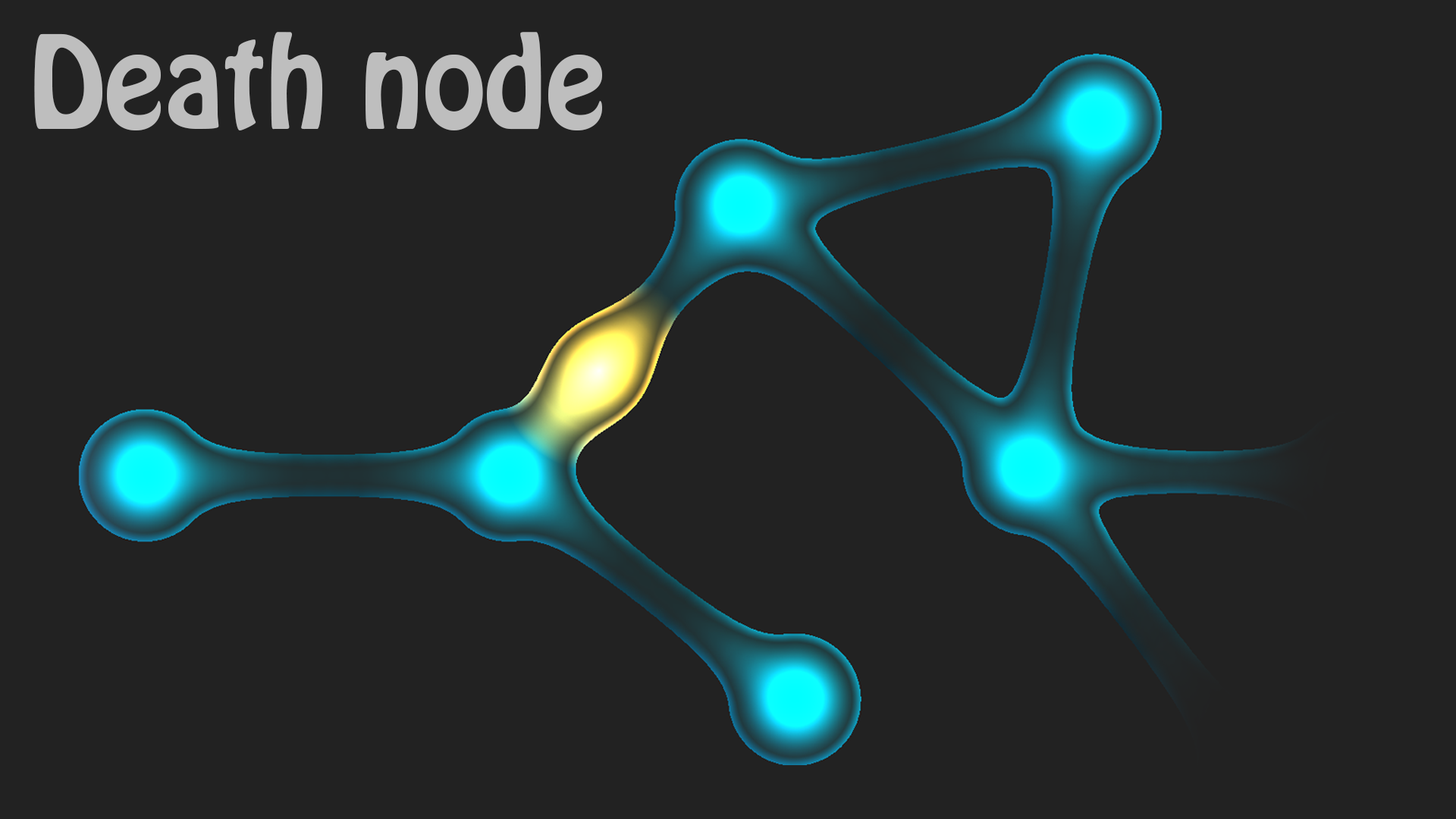
<style>
.page{position:relative;width:1456px;height:819px;background:#222222}
.page>*{position:absolute;margin:0}
.t1{font:113.7px "HoboStd";color:#bebebe}
</style>
<div class="page">
<p class="t1" style="left:34px;top:32px;width:568px;height:98px">Death node</p>
</div>
